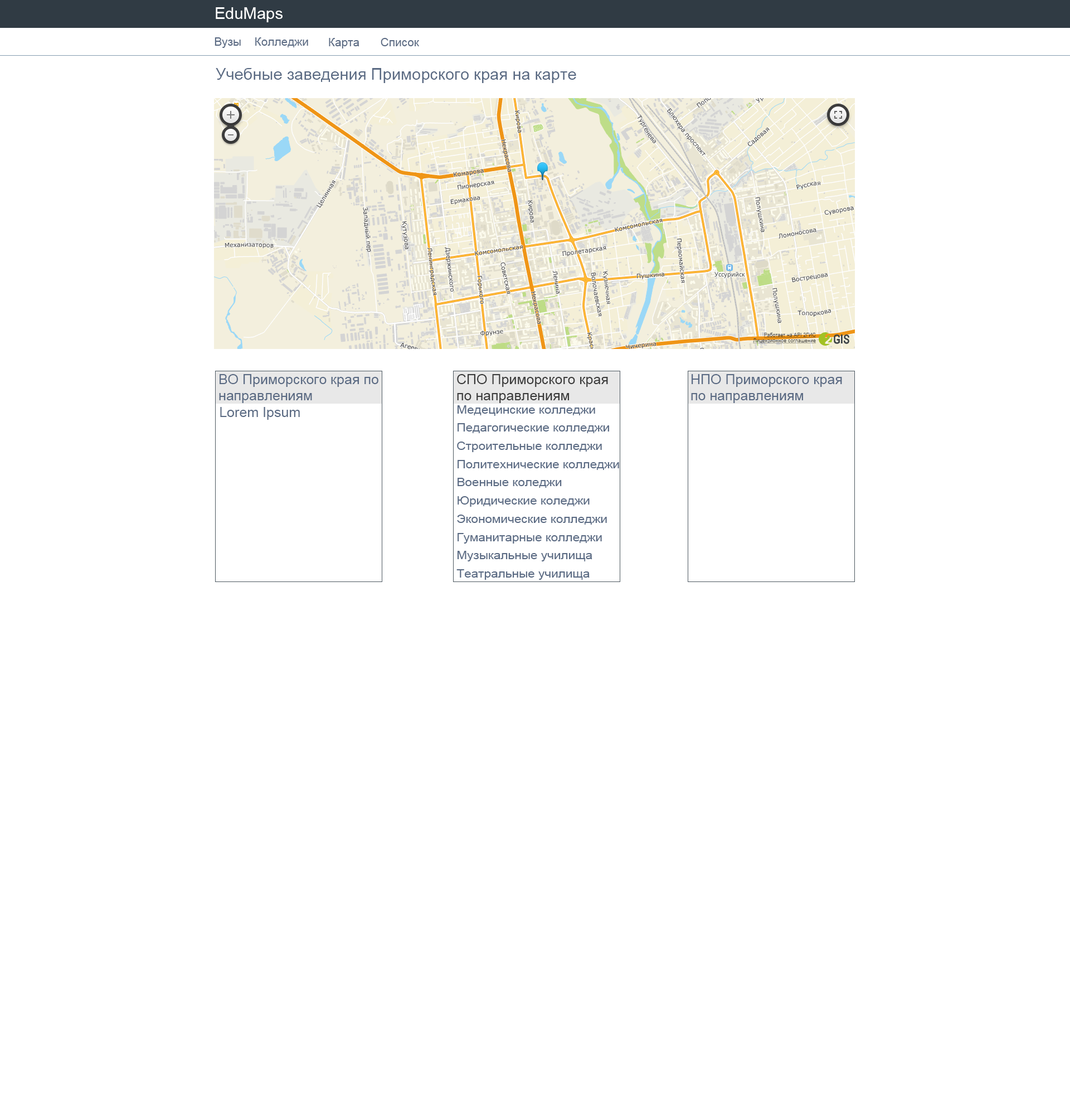
<style>
.page{position:relative;width:1070px;height:1115px;background:#ffffff}
.page>*{position:absolute;margin:0}
.t1{font:16.3px "ArialMT";color:#ffffff}
.t2{font:11.6px "ArialMT";color:#5a6a83}
.t3{font:16.3px "ArialMT";color:#5a6a83}
.t4{font:13.9px/16.3px "ArialMT";color:#5a6a83}
.t5{font:13.9px/16.3px "ArialMT";color:#3a3a3a}
.t6{font:13.9px "ArialMT";color:#5a6a83}
.t7{font:11.4px/18.2px "ArialMT";color:#5a6a83;scale:1.1 1}
</style>
<div class="page">
<p class="t1" style="left:216px;top:7px;width:67px;height:15px">EduMaps</p>
<p class="t2" style="left:215px;top:37px;width:26px;height:11px">Вузы</p>
<p class="t2" style="left:255px;top:37px;width:53px;height:10px">Колледжи</p>
<p class="t2" style="left:329px;top:38px;width:30px;height:10px">Карта</p>
<p class="t2" style="left:381px;top:38px;width:38px;height:8px">Список</p>
<p class="t3" style="left:216px;top:68px;width:360px;height:15px">Учебные заведения Приморского края на карте</p>
<p class="t4" style="left:219px;top:374px;width:159px;height:29px">ВО Приморского края по направлениям</p>
<p class="t5" style="left:457px;top:374px;width:151px;height:29px">СПО Приморского края по направлениям</p>
<p class="t4" style="left:691px;top:374px;width:151px;height:29px">НПО Приморского края по направлениям</p>
<p class="t6" style="left:220px;top:407px;width:80px;height:13px">Lorem Ipsum</p>
<p class="t7" style="left:456px;top:405px;width:163px;height:175px">Медецинские колледжи<br>Педагогические колледжи<br>Строительные колледжи<br>Политехнические колледжи<br>Военные коледжи<br>Юридические коледжи<br>Экономические колледжи<br>Гуманитарные колледжи<br>Музыкальные училища<br>Театральные училища</p>
</div>
